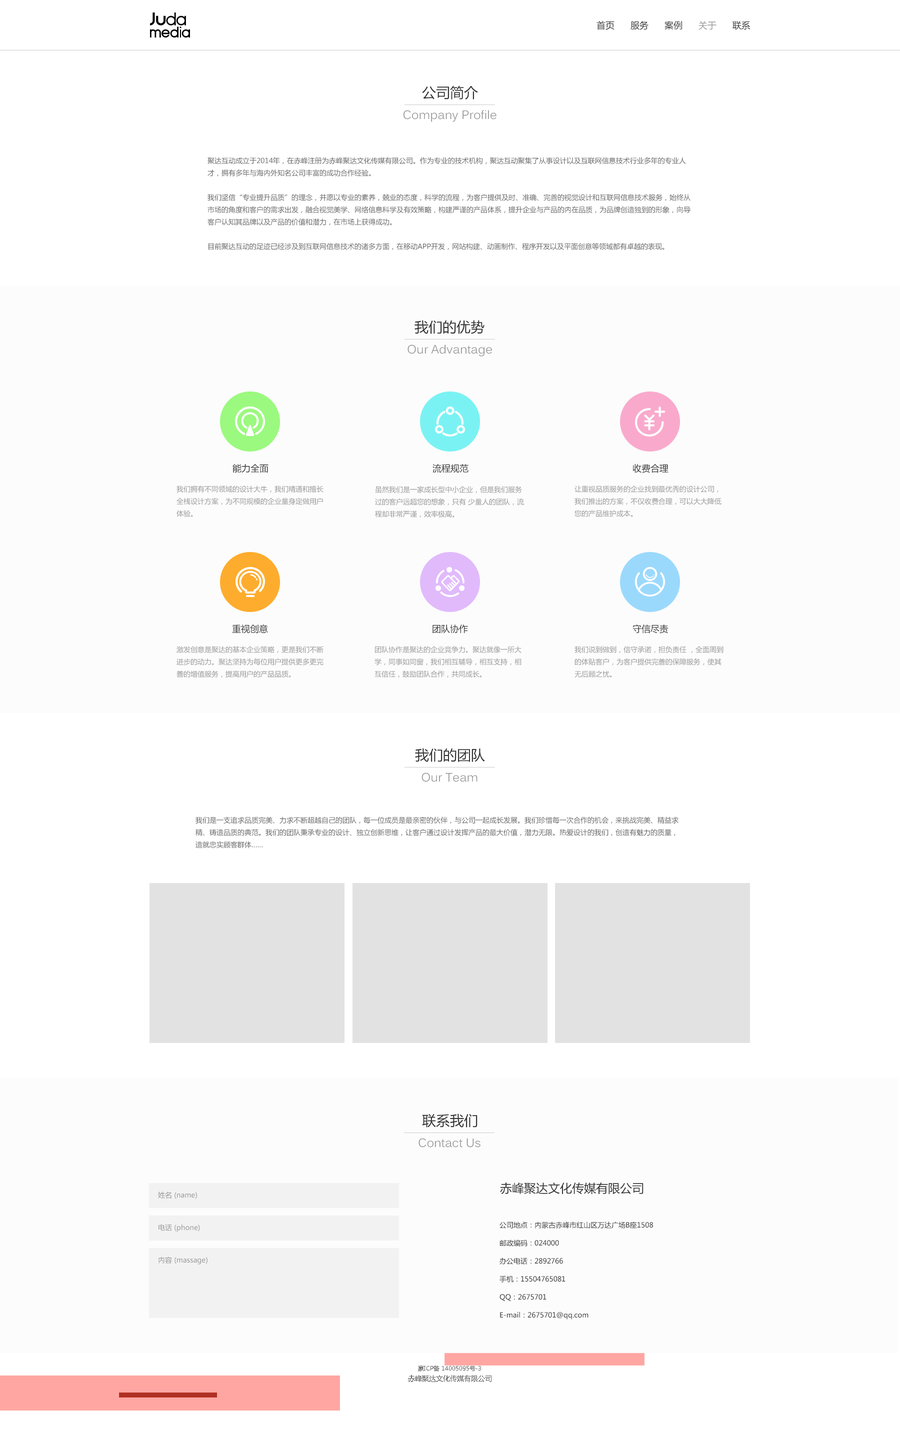
<style>
.page{position:relative;width:900px;height:1455px;background:#ffffff}
.page>*{position:absolute;margin:0}
.t1{font:9px "MicrosoftYaHei";color:#333333}
.t2{font:9px "MicrosoftYaHei";color:#999999}
.t3{font:14px "MicrosoftYaHei";color:#333333}
.t4{font:12px "Kalinga";color:#999999}
.t5{font:7px "MicrosoftYaHei";color:#666666}
.t6{font:7px "MicrosoftYaHei";color:#999999}
.t7{font:12px "MicrosoftYaHei";color:#333333}
.t8{font:7px/18px "MicrosoftYaHei";color:#333333}
.t9{font:6px "MicrosoftYaHei";color:#666666}
</style>
<div class="page">
<p class="t1" style="left:597px;top:21px;width:154px;height:9px">首页      服务      案例      <span class="t2">关于</span>      联系</p>
<p class="t3" style="left:422px;top:86px;width:56px;height:14px">公司简介</p>
<p class="t4" style="left:403px;top:110px;width:94px;height:12px">Company Profile</p>
<p class="t5" style="left:208px;top:157px;width:483px;height:93px">聚达互动成立于2014年，在赤峰注册为赤峰聚达文化传媒有限公司。作为专业的技术机构，聚达互动聚集了从事设计以及互联网信息技术行业多年的专业人才，拥有多年与海内外知名公司丰富的成功合作经验。<br><br>我们坚信“专业提升品质”的理念，并愿以专业的素养，兢业的态度，科学的流程，为客户提供及时、准确、完善的视觉设计和互联网信息技术服务，始终从市场的角度和客户的需求出发，融合视觉美学、网络信息科学及有效策略，构建严谨的产品体系，提升企业与产品的内在品质，为品牌创造独到的形象，向导客户认知其品牌以及产品的价值和潜力，在市场上获得成功。<br><br>目前聚达互动的足迹已经涉及到互联网信息技术的诸多方面，在移动APP开发，网站构建、动画制作、程序开发以及平面创意等领域都有卓越的表现。</p>
<p class="t3" style="left:415px;top:320px;width:70px;height:14px">我们的优势</p>
<p class="t4" style="left:408px;top:345px;width:84px;height:12px">Our Advantage</p>
<p class="t1" style="left:233px;top:464px;width:36px;height:9px">能力全面</p>
<p class="t1" style="left:433px;top:464px;width:36px;height:9px">流程规范</p>
<p class="t1" style="left:633px;top:464px;width:36px;height:9px">收费合理</p>
<p class="t6" style="left:177px;top:486px;width:147px;height:31px">我们拥有不同领域的设计大牛，我们精通和擅长<br>全桟设计方案，为不同规模的企业量身定做用户<br>体验。</p>
<p class="t6" style="left:575px;top:486px;width:147px;height:31px">让重视品质服务的企业找到最优秀的设计公司，<br>我们推出的方案，不仅收费合理，可以大大降低<br>您的产品维护成本。</p>
<p class="t6" style="left:375px;top:486px;width:149px;height:32px">虽然我们是一家成长型中小企业，但是我们服务<br>过的客户远超您的想象，只有 少量人的团队，流<br>程却非常严谨，效率极高。</p>
<p class="t1" style="left:232px;top:624px;width:36px;height:10px">重视创意</p>
<p class="t1" style="left:433px;top:625px;width:35px;height:9px">团队协作</p>
<p class="t1" style="left:633px;top:625px;width:36px;height:9px">守信尽责</p>
<p class="t6" style="left:177px;top:646px;width:147px;height:32px">激发创意是聚达的基本企业策略，更是我们不断<br>进步的动力。聚达坚持为每位用户提供更多更完<br>善的增值服务，提高用户的产品品质。</p>
<p class="t6" style="left:375px;top:646px;width:147px;height:32px">团队协作是聚达的企业竞争力。聚达就像一所大<br>学，同事如同窗，我们相互辅导，相互支持，相<br>互信任，鼓励团队合作，共同成长。</p>
<p class="t6" style="left:575px;top:646px;width:149px;height:32px">我们说到做到，信守承诺，担负责任 ，全面周到<br>的体贴客户，为客户提供完善的保障服务，使其<br>无后顾之忧。</p>
<p class="t3" style="left:415px;top:748px;width:70px;height:14px">我们的团队</p>
<p class="t4" style="left:422px;top:773px;width:56px;height:9px">Our Team</p>
<p class="t5" style="left:196px;top:817px;width:483px;height:32px">我们是一支追求品质完美、力求不断超越自己的团队，每一位成员是最亲密的伙伴，与公司一起成长发展。我们珍惜每一次合作的机会，来挑战完美、精益求精、铸造品质的典范。我们的团队秉承专业的设计、独立创新思维，让客户通过设计发挥产品的最大价值，潜力无限。热爱设计的我们，创造有魅力的质量，造就忠实顾客群体……</p>
<p class="t3" style="left:422px;top:1114px;width:56px;height:14px">联系我们</p>
<p class="t4" style="left:419px;top:1138px;width:62px;height:10px">Contact Us</p>
<p class="t6" style="left:158px;top:1192px;width:39px;height:7px">姓名 (name)</p>
<p class="t7" style="left:500px;top:1183px;width:144px;height:12px">赤峰聚达文化传媒有限公司</p>
<p class="t6" style="left:159px;top:1224px;width:41px;height:8px">电话 (phone)</p>
<p class="t8" style="left:500px;top:1222px;width:153px;height:98px">公司地点：内蒙古赤峰市红山区万达广场B座1508<br>邮政编码：024000<br>办公电话：2892766<br>手机：15504765081<br>QQ：2675701<br>E-mail：2675701@qq.com</p>
<p class="t6" style="left:159px;top:1257px;width:49px;height:8px">内容 (massage)</p>
<p class="t9" style="left:418px;top:1366px;width:63px;height:6px">蒙ICP备 14005095号-3</p>
<p class="t5" style="left:408px;top:1375px;width:84px;height:7px">赤峰聚达文化传媒有限公司</p>
</div>
